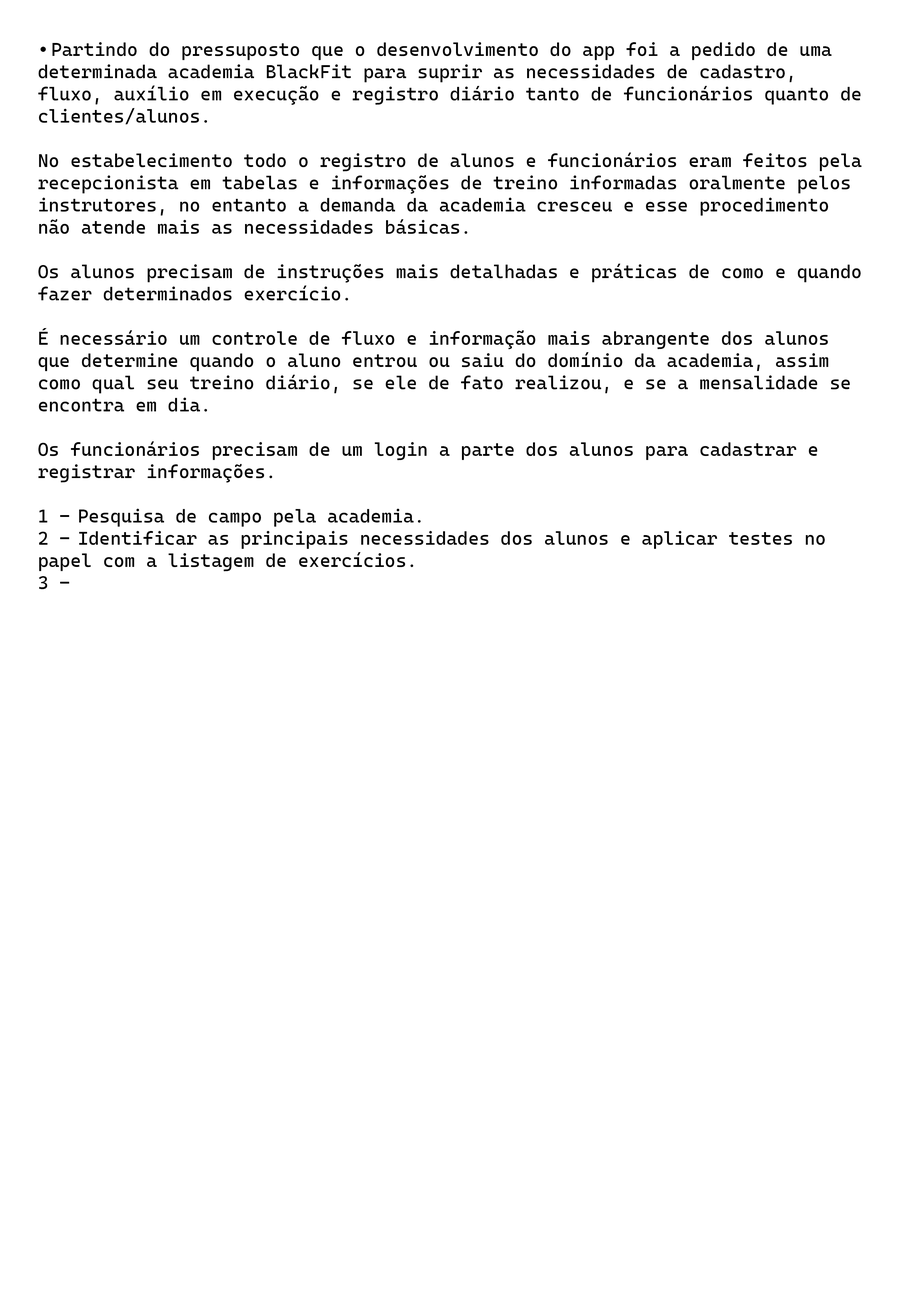
<style>
.page{position:relative;width:918px;height:1299px;background:#ffffff}
.page>*{position:absolute;margin:0}
.t1{font:18.5px "CascadiaMono-Regular";color:#000000}
</style>
<div class="page">
<p class="t1" style="left:38px;top:42px;width:824px;height:547px">• Partindo do pressuposto que o desenvolvimento do app foi a pedido de uma determinada academia BlackFit para suprir as necessidades de cadastro, fluxo, auxílio em execução e registro diário tanto de funcionários quanto de clientes/alunos.<br><br>No estabelecimento todo o registro de alunos e funcionários eram feitos pela recepcionista em tabelas e informações de treino informadas oralmente pelos instrutores, no entanto a demanda da academia cresceu e esse procedimento não atende mais as necessidades básicas.<br><br>Os alunos precisam de instruções mais detalhadas e práticas de como e quando fazer determinados exercício.<br><br>É necessário um controle de fluxo e informação mais abrangente dos alunos que determine quando o aluno entrou ou saiu do domínio da academia, assim como qual seu treino diário, se ele de fato realizou, e se a mensalidade se encontra em dia.<br><br>Os funcionários precisam de um login a parte dos alunos para cadastrar e registrar informações.<br> <br>1 - Pesquisa de campo pela academia.<br>2 - Identificar as principais necessidades dos alunos e aplicar testes no papel com a listagem de exercícios.<br>3 -</p>
</div>
